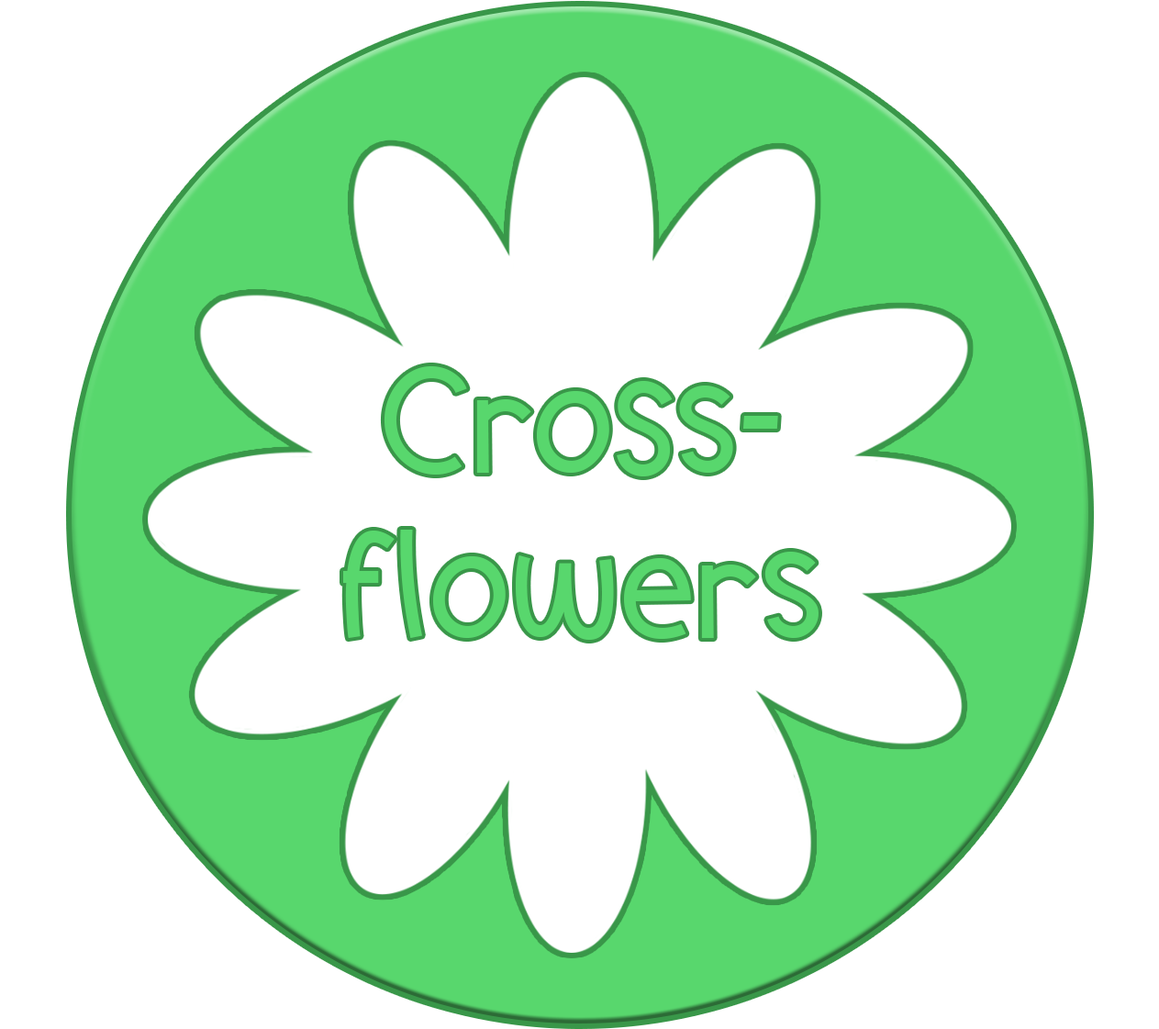
<style>
.page{position:relative;width:1159px;height:1029px;background:#ffffff}
.page>*{position:absolute;margin:0}
.t1{font:137.7px "TrexosRegular";color:#58d76d}
</style>
<div class="page">
<p class="t1" style="left:343px;top:366px;width:476px;height:274px;text-align:center">Cross-<br>flowers</p>
</div>
